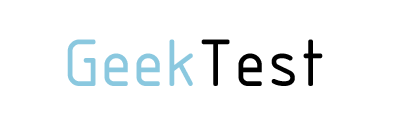
<style>
.page{position:relative;width:400px;height:126px;background:#ffffff}
.page>*{position:absolute;margin:0}
.t1{font:72px "ISOCPEUR";color:#8ac8df}
.t2{font:72px "ISOCPEUR";color:#000000}
</style>
<div class="page">
<p class="t1" style="left:67px;top:39px;width:256px;height:47px">Geek<span class="t2">Test</span></p>
</div>
